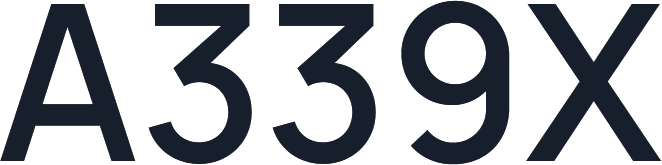
<style>
.page{position:relative;width:662px;height:165px;background:#ffffff}
.page>*{position:absolute;margin:0}
.t1{font:218px "Manrope-SemiBold";color:#171f2c}
</style>
<div class="page">
<p class="t1" style="left:0px;top:0px;width:662px;height:165px">A339X</p>
</div>
